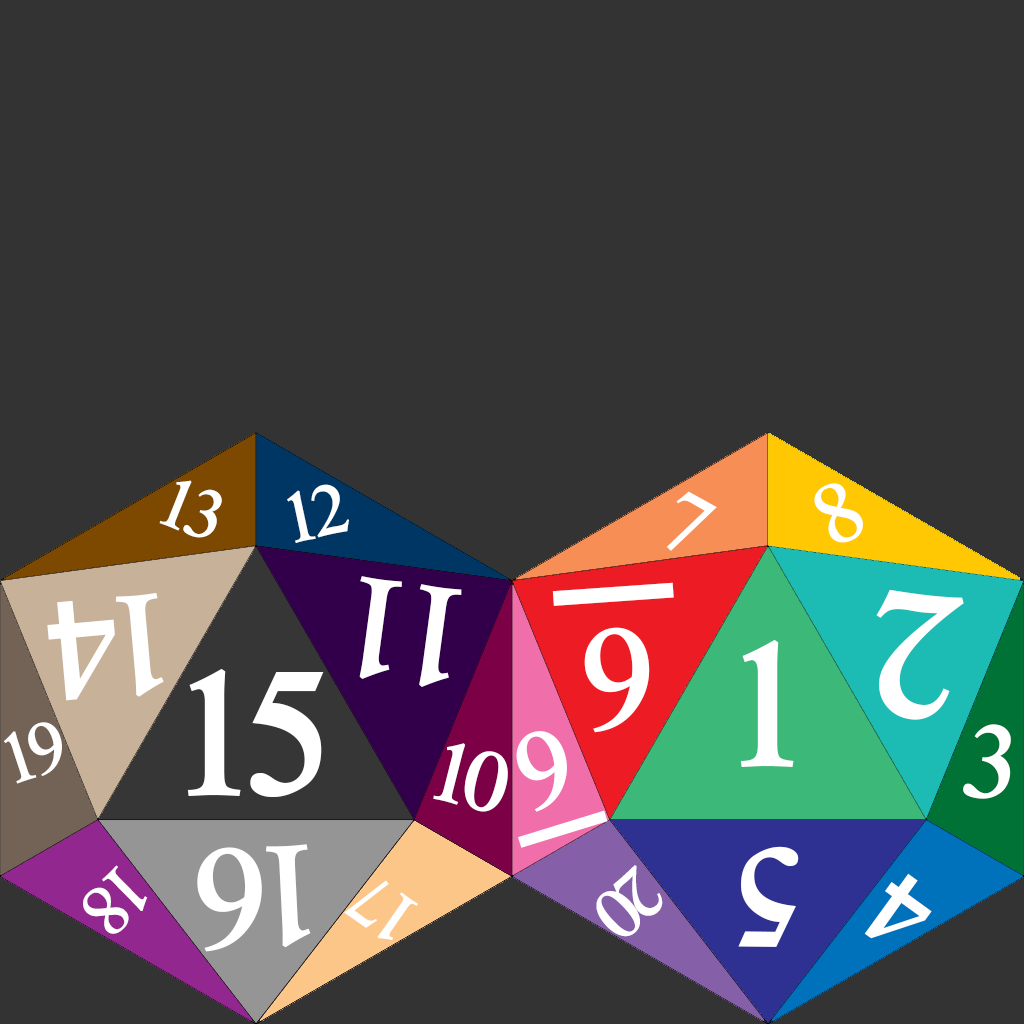
<style>
.page{position:relative;width:1024px;height:1024px;background:#333333}
.page>*{position:absolute;margin:0}
.t1{font:100px "Rod";letter-spacing:-0.3em;color:#ffffff}
.t2{font:120px "Rod";color:#ffffff}
.t3{font:200px "Rod";letter-spacing:-0.3em;color:#ffffff}
.t4{font:200px "Rod";color:#ffffff;text-decoration:underline}
.t5{font:250px "Rod";color:#ffffff}
.t6{font:250px "Rod";letter-spacing:-0.3em;color:#ffffff}
.t7{font:150px "Rod";color:#ffffff}
.t8{font:150px "Rod";color:#ffffff;text-decoration:underline}
.t9{font:120px "Rod";letter-spacing:-0.3em;color:#ffffff}
.t10{font:200px "Rod";color:#ffffff}
</style>
<div class="page">
<p class="t1" style="left:159px;top:480px;width:63px;height:58px;rotate:22deg">13</p>
<p class="t1" style="left:287px;top:484px;width:62px;height:59px;rotate:-12deg">12</p>
<p class="t2" style="left:814px;top:483px;width:49px;height:60px;rotate:-28deg">8</p>
<p class="t2" style="left:666px;top:491px;width:51px;height:60px;rotate:29deg">7</p>
<p class="t3" style="left:359px;top:576px;width:103px;height:111px;rotate:-172deg">11</p>
<p class="t4" style="left:552px;top:582px;width:122px;height:151px;rotate:176deg">6</p>
<p class="t3" style="left:47px;top:593px;width:117px;height:108px;rotate:175deg">14</p>
<p class="t5" style="left:876px;top:589px;width:88px;height:131px;rotate:-173deg">2</p>
<p class="t5" style="left:740px;top:640px;width:54px;height:127px">1</p>
<p class="t6" style="left:187px;top:669px;width:137px;height:128px">15</p>
<p class="t1" style="left:4px;top:722px;width:58px;height:62px;rotate:-18deg">19</p>
<p class="t7" style="left:963px;top:724px;width:48px;height:75px;rotate:9deg">3</p>
<p class="t8" style="left:516px;top:731px;width:92px;height:117px;rotate:-17deg">9</p>
<p class="t9" style="left:433px;top:743px;width:75px;height:69px;rotate:14deg">10</p>
<p class="t3" style="left:197px;top:844px;width:114px;height:108px;rotate:177deg">16</p>
<p class="t10" style="left:738px;top:846px;width:61px;height:101px;rotate:-179deg">5</p>
<p class="t1" style="left:83px;top:865px;width:65px;height:69px;rotate:136deg">18</p>
<p class="t1" style="left:596px;top:865px;width:67px;height:72px;rotate:138deg">20</p>
<p class="t1" style="left:344px;top:880px;width:74px;height:60px;rotate:-145deg">17</p>
<p class="t7" style="left:864px;top:873px;width:68px;height:66px;rotate:-144deg">4</p>
</div>
